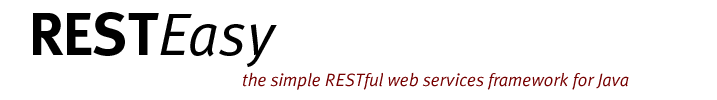
<style>
.page{position:relative;width:717px;height:100px;background:#ffffff}
.page>*{position:absolute;margin:0}
.t1{font:60px "Meta-Bold";color:#000000}
.t2{font:60px "MetaPlusNormal-Italic";color:#000000}
.t3{font:18px "MetaPlusNormal-Italic";color:#760000}
</style>
<div class="page">
<p class="t1" style="left:33px;top:12px;width:244px;height:55px">REST<span class="t2">Easy</span></p>
<p class="t3" style="left:243px;top:72px;width:386px;height:18px">the simple RESTful web services framework for Java</p>
</div>
